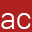
<style>
.page{position:relative;width:32px;height:32px;background:#af2020}
.page>*{position:absolute;margin:0}
.t1{font:30px "Roboto-Light";color:#ffffff}
</style>
<div class="page">
<p class="t1" style="left:1px;top:13px;width:30px;height:16px">ac</p>
</div>
